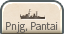
<style>
.page{position:relative;width:64px;height:34px}
.page>*{position:absolute;margin:0}
.t1{font:10px "UDShinGoPro-Light";color:#6a6560;scale:0.9 1}
</style>
<div class="page">
<p class="t1" style="left:6px;top:22px;width:52px;height:11px">Pnjg, Pantai</p>
</div>
